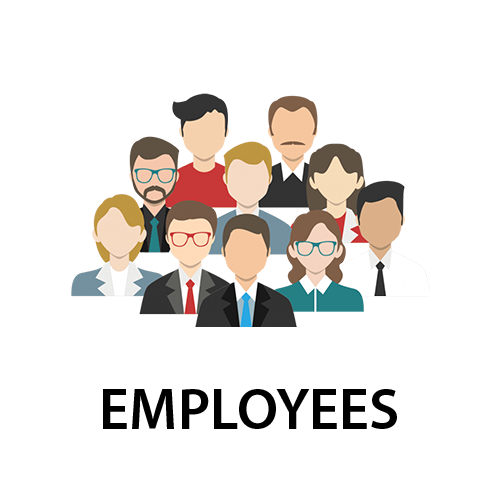
<style>
.page{position:relative;width:500px;height:500px;background:#ffffff}
.page>*{position:absolute;margin:0}
.t1{font:58.3px "MyriadPro-Semibold";color:#000000}
</style>
<div class="page">
<p class="t1" style="left:103px;top:389px;width:294px;height:40px">EMPLOYEES</p>
</div>
